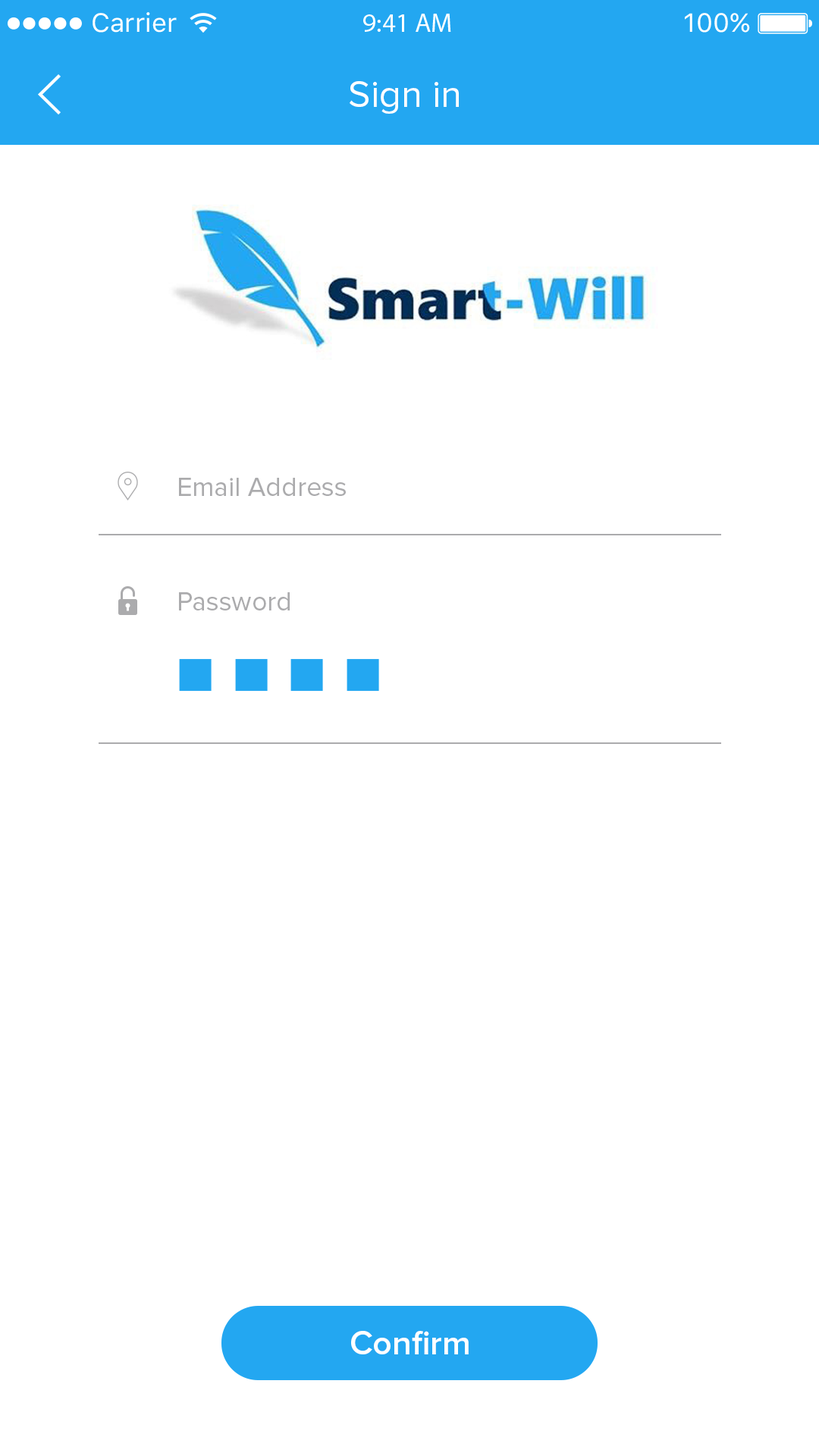
<style>
.page{position:relative;width:819px;height:1456px;background:#ffffff}
.page>*{position:absolute;margin:0}
.t1{font:38.1px "ProximaNova-Regular";color:#ffffff}
.t2{font:27.3px "ProximaNova-Regular";color:#ababad}
.t3{font:34.1px "ProximaNova-Semibold";color:#ffffff}
</style>
<div class="page">
<p class="t1" style="left:350px;top:81px;width:109px;height:33px">Sign in</p>
<p class="t2" style="left:179px;top:478px;width:167px;height:18px">Email Address</p>
<p class="t2" style="left:179px;top:592px;width:111px;height:18px">Password</p>
<p class="t3" style="left:351px;top:1331px;width:118px;height:23px">Confirm</p>
</div>
